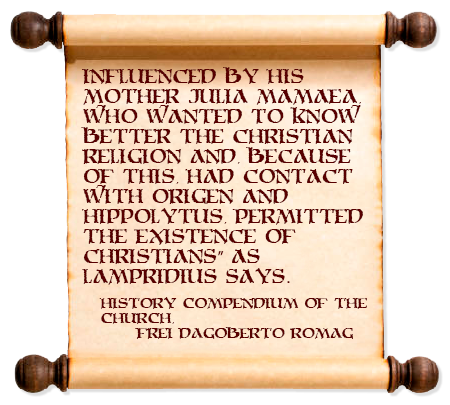
<style>
.page{position:relative;width:450px;height:405px;background:#ffffff}
.page>*{position:absolute;margin:0}
.t1{font:16.7px "MoriaCitadel";color:#580000}
.t2{font:16.7px "MyriadPro-Regular";color:#580000}
.t3{font:12.5px "MoriaCitadel";color:#580000}
</style>
<div class="page">
<p class="t1" style="left:81px;top:67px;width:282px;height:218px">Influenced by his<br>mother Julia Mamaea,<br>who wanted to know<br>better the christian<br>religion and, because<br>of this, had contact<br>with Origen and<br>Hippolytus, permitted<br>the existence of<br>christians<span class="t2">”</span> as<br>Lampridius says.</p>
<p class="t3" style="left:99px;top:297px;width:268px;height:42px">History Compendium of the<br>Church,<br> Frei Dagoberto Romag</p>
</div>
